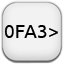
<style>
.page{position:relative;width:64px;height:64px;background:#f2f2f2}
.page>*{position:absolute;margin:0}
.t1{font:19.3px "Ubuntu";color:#000000}
</style>
<div class="page">
<p class="t1" style="left:4px;top:25px;width:54px;height:13px">0FA3&gt;</p>
</div>
